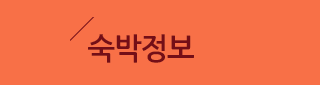
<style>
.page{position:relative;width:320px;height:85px;background:#f87047}
.page>*{position:absolute;margin:0}
.t1{font:30px "NanumGothicBold";letter-spacing:-0.05em;color:#740e17}
</style>
<div class="page">
<p class="t1" style="left:88px;top:34px;width:106px;height:29px">숙박정보</p>
</div>
